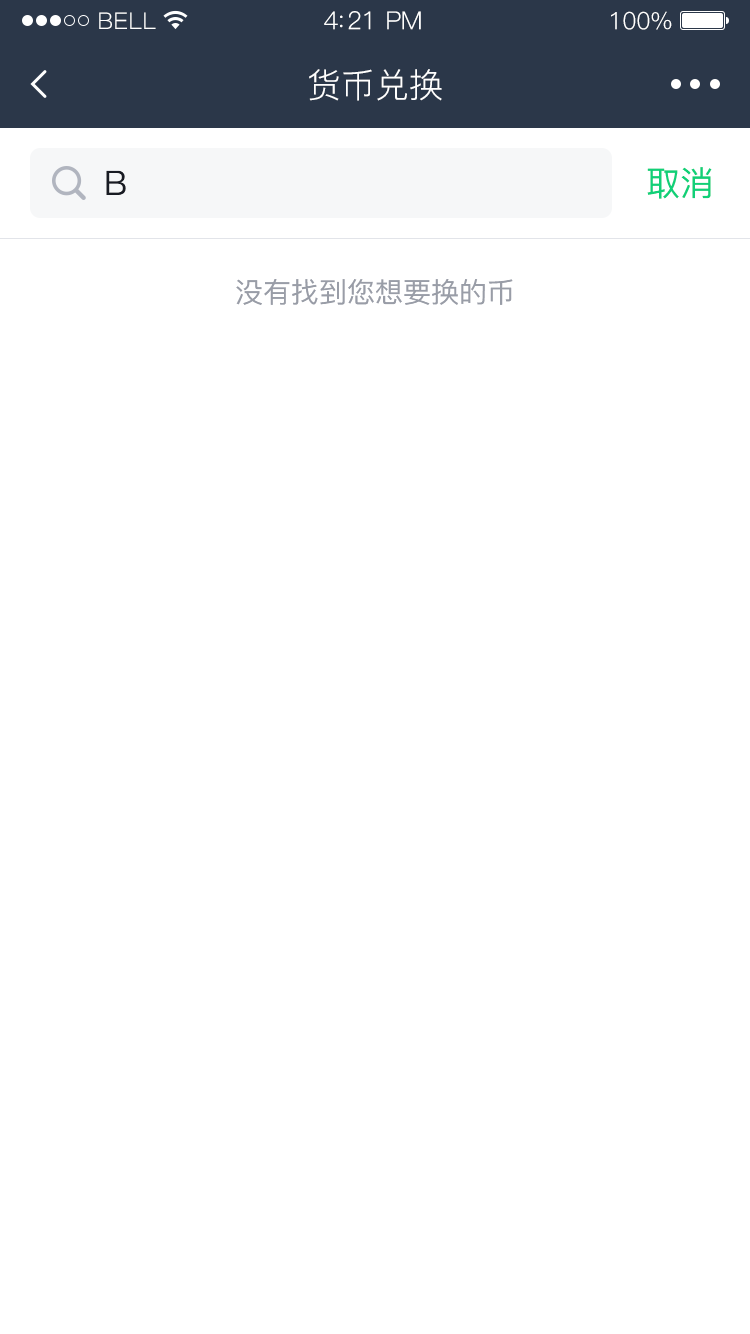
<style>
.page{position:relative;width:750px;height:1334px;background:#ffffff}
.page>*{position:absolute;margin:0}
.t1{font:23px "PingFang-SC-Regular";letter-spacing:0.02em;color:#ffffff}
.t2{font:25px "PingFang-SC-Regular";letter-spacing:-0.02em;color:#ffffff}
.t3{font:24px "PingFang-SC-Regular";letter-spacing:-0.02em;color:#ffffff}
.t4{font:34px "PingFang-SC-Regular";color:#ffffff}
.t5{font:34px "PingFang-SC-Medium";color:#181b23}
.t6{font:34px "PingFang-SC-Medium";color:#10d078}
.t7{font:28px "PingFang-SC-Medium";color:#999da7}
</style>
<div class="page">
<p class="t1" style="left:99px;top:12px;width:57px;height:17px">BELL</p>
<p class="t2" style="left:324px;top:11px;width:97px;height:19px">4:21 PM</p>
<p class="t3" style="left:611px;top:11px;width:61px;height:19px">100%</p>
<p class="t4" style="left:309px;top:69px;width:133px;height:32px">货币兑换</p>
<p class="t5" style="left:106px;top:170px;width:20px;height:25px">B</p>
<p class="t6" style="left:647px;top:167px;width:65px;height:32px">取消</p>
<p class="t7" style="left:236px;top:279px;width:277px;height:26px">没有找到您想要换的币</p>
</div>
